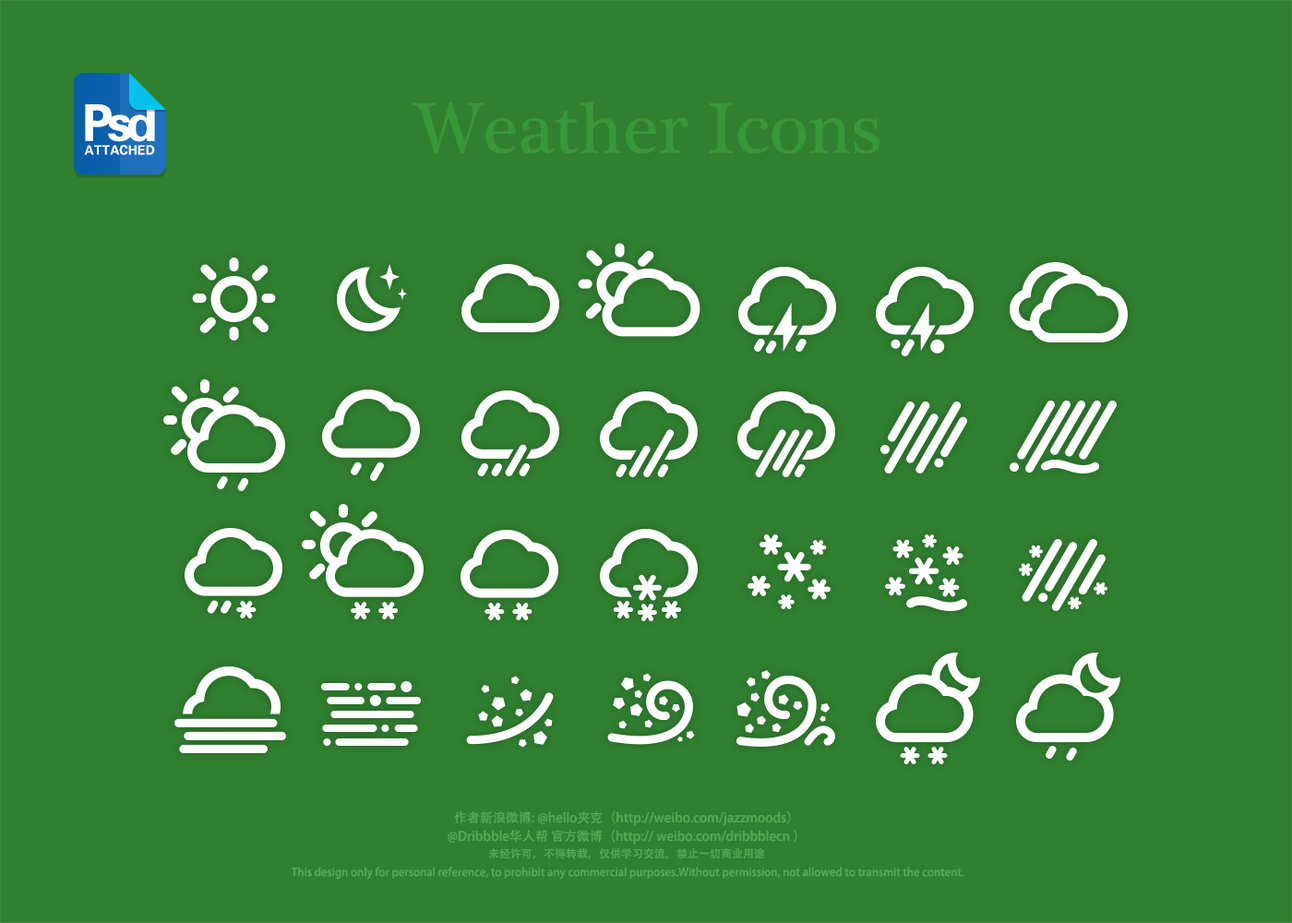
<style>
.page{position:relative;width:1292px;height:923px;background:#308030}
.page>*{position:absolute;margin:0}
.t1{font:73.8px "PlantagenetCherokee";color:#389738}
.t2{font:50.8px "FZZYJW--GB1-0";letter-spacing:-0.12em;color:#ffffff}
.t3{font:12.9px "FZZYJW--GB1-0";letter-spacing:0.01em;color:#ffffff}
.t4{font:11.1px/18.5px "AdobeHeitiStd-Regular";color:#54a854}
.t5{font:12.9px/18.5px "AdobeHeitiStd-Regular";color:#54a854}
</style>
<div class="page">
<p class="t1" style="left:413px;top:101px;width:467px;height:53px">Weather Icons</p>
<p class="t2" style="left:85px;top:104px;width:70px;height:38px">Psd</p>
<p class="t3" style="left:84px;top:145px;width:71px;height:10px">ATTACHED</p>
<p class="t4" style="left:292px;top:811px;width:672px;height:69px;text-align:center"><span class="t5">作者新浪微博: @hello夹克（http://weibo.com/jazzmoods）<br>@Dribbble华人帮 官方微博（http:// weibo.com/dribbblecn ）<br></span>未经许可，不得转载，仅供学习交流，禁止一切商业用途<br>  This design only for personal reference, to prohibit any commercial purposes.Without permission, not allowed to transmit the content.</p>
</div>
